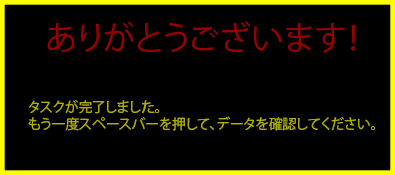
<style>
.page{position:relative;width:395px;height:175px;background:#000000}
.page>*{position:absolute;margin:0}
.t1{font:32.5px "KozGoPr6N-Regular";color:#950202}
.t2{font:13.8px "KozGoPr6N-Regular";color:#b0af00}
</style>
<div class="page">
<p class="t1" style="left:47px;top:21px;width:309px;height:32px">ありがとうございます！</p>
<p class="t2" style="left:28px;top:100px;width:348px;height:31px">タスクが完了しました。<br>もう一度スペースバーを押して、データを確認してください。</p>
</div>
